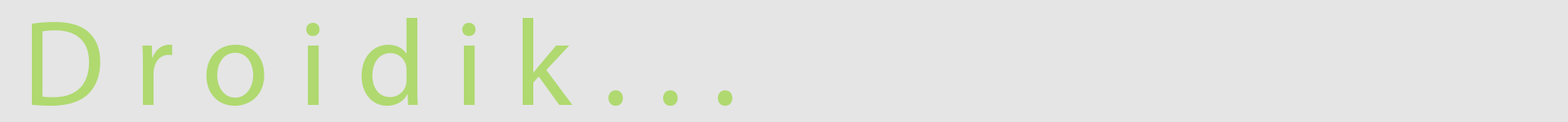
<style>
.page{position:relative;width:1568px;height:122px;background:#e5e5e5}
.page>*{position:absolute;margin:0}
.t1{font:122.5px "MyriadPro-Regular";letter-spacing:0.24em;color:#b0d970}
</style>
<div class="page">
<p class="t1" style="left:32px;top:18px;width:701px;height:89px">Droidik...</p>
</div>
